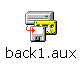
<style>
.page{position:relative;width:80px;height:80px;background:#ffffff}
.page>*{position:absolute;margin:0}
.t1{font:14px "MSReferenceSansSerif";color:#000000}
</style>
<div class="page">
<p class="t1" style="left:6px;top:47px;width:70px;height:11px">back1.aux</p>
</div>
